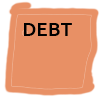
<style>
.page{position:relative;width:100px;height:100px;background:#e89065}
.page>*{position:absolute;margin:0}
.t1{font:20.3px "Corbel-Bold";color:#000000}
</style>
<div class="page">
<p class="t1" style="left:24px;top:23px;width:48px;height:13px">DEBT</p>
</div>
